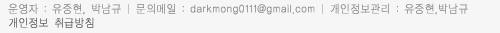
<style>
.page{position:relative;width:500px;height:33px;background:#f6f6f6}
.page>*{position:absolute;margin:0}
.t1{font:11px/14px "YDIYGO110-KSCpc-EUC-H";color:#848484;font-weight:bold;scale:0.9 1}
.t2{font:11px/14px "YDIYGO110-KSCpc-EUC-H";color:#545454;font-weight:bold;scale:0.9 1}
</style>
<div class="page">
<p class="t1" style="left:8px;top:3px;width:460px;height:25px">운영자 : 유중현, 박남규 | 문의메일 : darkmong0111@gmail.com | 개인정보관리 : 유중현,박남규<br><span class="t2">개인정보 취급방침</span></p>
</div>
